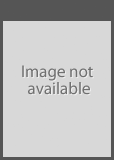
<style>
.page{position:relative;width:114px;height:160px;background:#d8d8d8}
.page>*{position:absolute;margin:0}
.t1{font:17px/17px "MyriadPro-Regular";color:#707070}
</style>
<div class="page">
<p class="t1" style="left:22px;top:65px;width:71px;height:30px;text-align:center">Image not <br>available</p>
</div>
